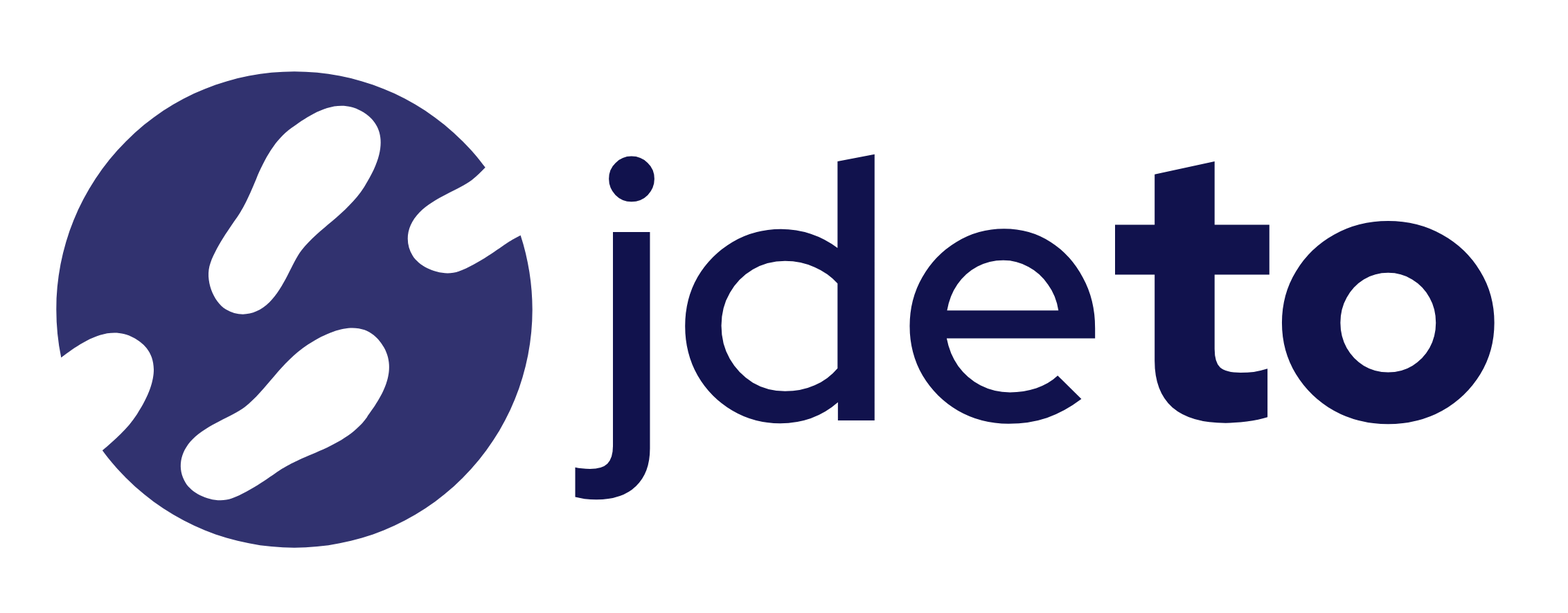
<style>
.page{position:relative;width:1568px;height:613px;background:#ffffff}
.page>*{position:absolute;margin:0}
.t1{font:370px "RedHatDisplay-Medium";color:#11124d}
.t2{font:370px "RedHatDisplay-Black";color:#11124d}
</style>
<div class="page">
<p class="t1" style="left:575px;top:154px;width:920px;height:346px">jde<span class="t2">to</span></p>
</div>
